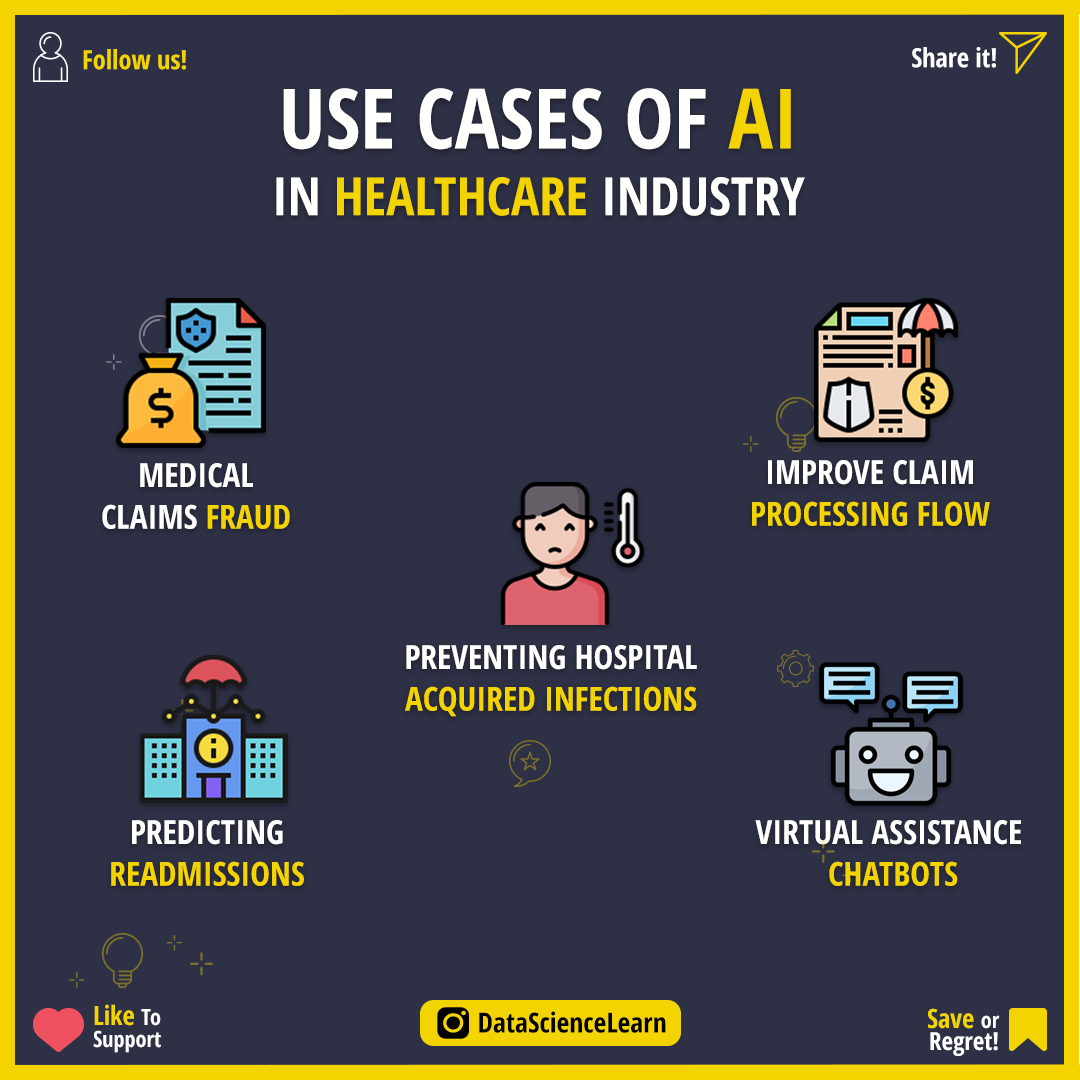
<style>
.page{position:relative;width:1080px;height:1080px;background:#2e3045}
.page>*{position:absolute;margin:0}
.t1{font:26.4px "OpenSans-CondensedBold";color:#f3d400}
.t2{font:26.4px "OpenSans-CondensedBold";color:#ffffff}
.t3{font:83.3px/66.7px "OpenSans-CondensedBold";color:#fffffe}
.t4{font:83.3px/66.7px "OpenSans-CondensedBold";color:#f3d400}
.t5{font:52.8px/66.7px "OpenSans-CondensedBold";color:#fffffe}
.t6{font:52.8px/66.7px "OpenSans-CondensedBold";color:#f3d400}
.t7{font:33.3px/41.7px "OpenSans-CondensedBold";color:#f3d400}
.t8{font:33.3px/41.7px "OpenSans-CondensedBold";color:#ffffff}
.t9{font:22.2px/22.2px "OpenSans-CondensedBold";color:#ffffff}
.t10{font:26.4px/22.2px "OpenSans-CondensedBold";color:#f3d400}
.t11{font:27.8px "OpenSans-CondensedBold";color:#000000}
.t12{font:25px/22.2px "OpenSans-CondensedBold";color:#ffffff}
</style>
<div class="page">
<p class="t1" style="left:83px;top:49px;width:103px;height:21px">Follow us!</p>
<p class="t2" style="left:912px;top:47px;width:84px;height:21px">Share it!</p>
<p class="t3" style="left:276px;top:88px;width:529px;height:128px;text-align:center">USE CASES OF <span class="t4">AI<br></span><span class="t5">IN </span><span class="t6">HEALTHCARE </span><span class="t5">INDUSTRY</span></p>
<p class="t7" style="left:752px;top:460px;width:238px;height:66px;text-align:center"><span class="t8">IMPROVE CLAIM<br></span>PROCESSING FLOW</p>
<p class="t8" style="left:102px;top:463px;width:188px;height:66px;text-align:center">MEDICAL<br>CLAIMS <span class="t7">FRAUD</span></p>
<p class="t8" style="left:405px;top:645px;width:292px;height:72px;text-align:center">PREVENTING HOSPITAL<br><span class="t7">ACQUIRED INFECTIONS</span></p>
<p class="t7" style="left:111px;top:820px;width:193px;height:66px;text-align:center"><span class="t8">PREDICTING<br></span>READMISSIONS</p>
<p class="t8" style="left:755px;top:820px;width:266px;height:66px;text-align:center">VIRTUAL ASSISTANCE <br><span class="t7">CHATBOTS</span></p>
<p class="t9" style="left:93px;top:1004px;width:68px;height:49px"><span class="t10">Like </span>To<br>Support</p>
<p class="t11" style="left:479px;top:1011px;width:187px;height:22px">DataScienceLearn</p>
<p class="t12" style="left:928px;top:1008px;width:72px;height:48px;text-align:right"><span class="t10">Save </span><span class="t9">or<br></span>Regret!</p>
</div>
